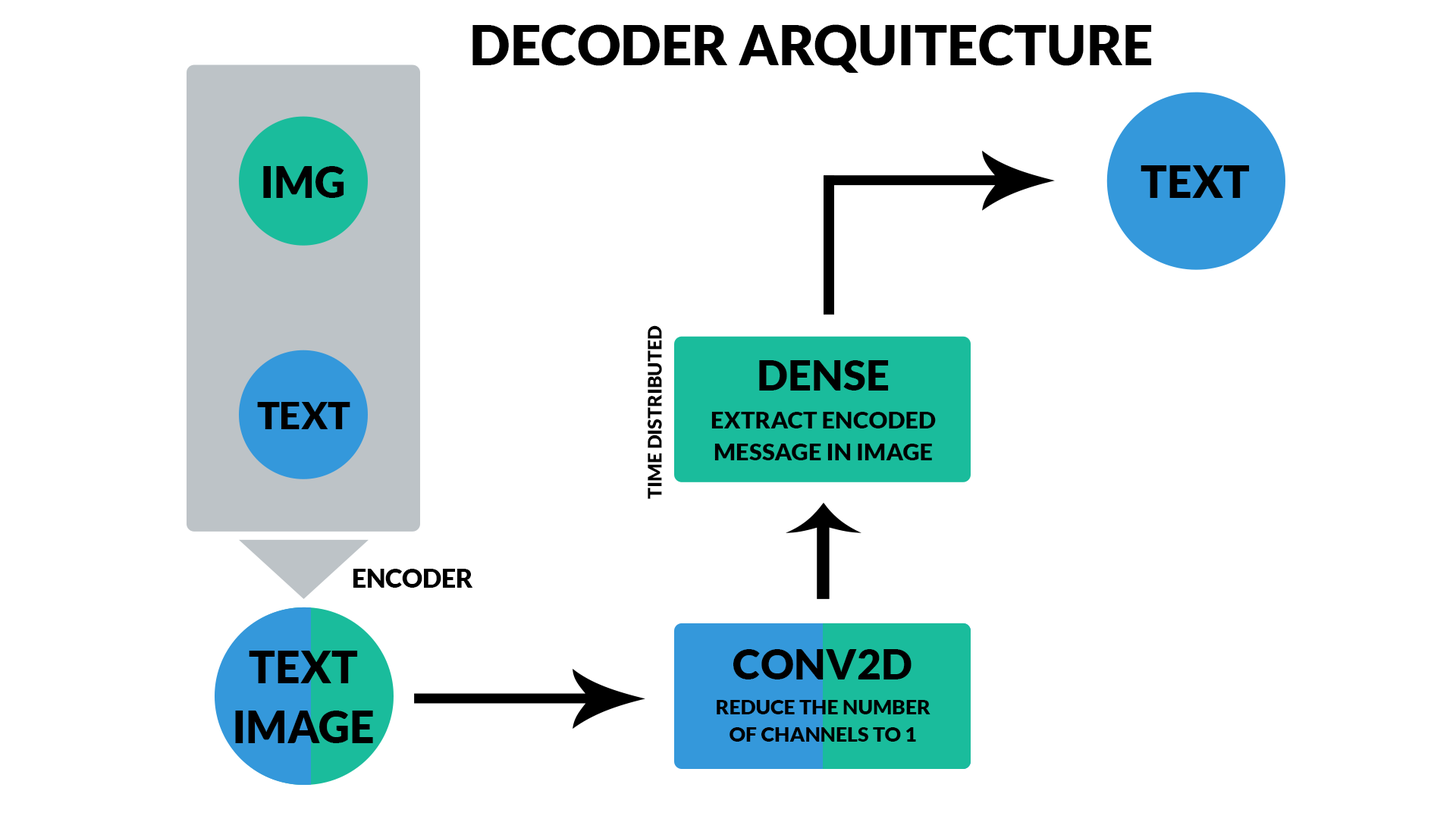
<style>
.page{position:relative;width:1456px;height:819px;background:#ffffff}
.page>*{position:absolute;margin:0}
.t1{font:54.6px "Lato-Black";color:#000000}
.t2{font:43.4px "Lato-Black";color:#000000}
.t3{font:44.1px "Lato-Black";color:#000000}
.t4{font:19.1px "Lato-Black";color:#000000}
.t5{font:42px "Lato-Black";color:#000000}
.t6{font:37.7px "Lato-Black";color:#000000}
.t7{font:23.7px/36.8px "Lato-Black";color:#000000}
.t8{font:25.6px "Lato-Black";color:#000000}
.t9{font:44.1px/68.5px "Lato-Black";color:#000000}
.t10{font:20.4px/31.7px "Lato-Black";color:#000000}
</style>
<div class="page">
<p class="t1" style="left:472px;top:24px;width:680px;height:49px">DECODER ARQUITECTURE</p>
<p class="t2" style="left:263px;top:166px;width:81px;height:32px">IMG</p>
<p class="t3" style="left:1141px;top:165px;width:109px;height:33px">TEXT</p>
<p class="t4" style="left:648px;top:325px;width:14px;height:174px;rotate:-90deg">TIME DISTRIBUTED</p>
<p class="t5" style="left:759px;top:360px;width:130px;height:31px">DENSE</p>
<p class="t6" style="left:257px;top:402px;width:93px;height:27px">TEXT</p>
<p class="t7" style="left:711px;top:412px;width:225px;height:48px;text-align:center">EXTRACT ENCODED<br>MESSAGE IN IMAGE</p>
<p class="t8" style="left:353px;top:569px;width:120px;height:19px">ENCODER</p>
<p class="t9" style="left:235px;top:651px;width:138px;height:92px;text-align:center">TEXT<br>IMAGE</p>
<p class="t5" style="left:733px;top:649px;width:179px;height:30px">CONV2D</p>
<p class="t10" style="left:717px;top:700px;width:213px;height:42px;text-align:center">REDUCE THE NUMBER<br>OF CHANNELS TO 1</p>
</div>
